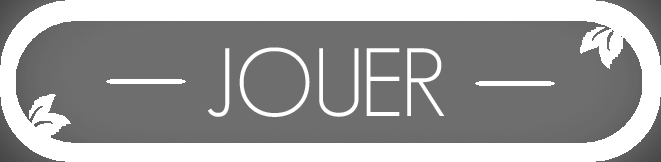
<style>
.page{position:relative;width:661px;height:162px;background:#6e6e6e}
.page>*{position:absolute;margin:0}
.t1{font:94.8px "GeosansLight";color:#ffffff}
</style>
<div class="page">
<p class="t1" style="left:207px;top:47px;width:238px;height:70px">JOUER</p>
</div>
